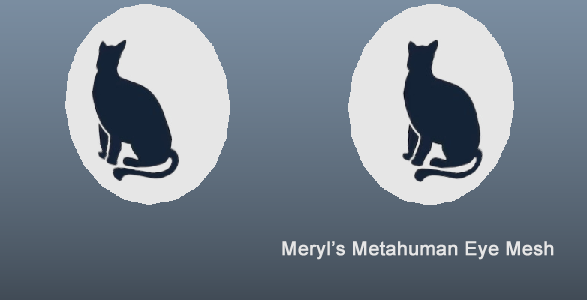
<style>
.page{position:relative;width:587px;height:300px;background:#e6e6e6}
.page>*{position:absolute;margin:0}
.t1{font:19.3px "ArialMT";color:#e6e6e6;font-weight:bold}
</style>
<div class="page">
<p class="t1" style="left:282px;top:241px;width:272px;height:19px">Meryl’s Metahuman Eye Mesh</p>
</div>
